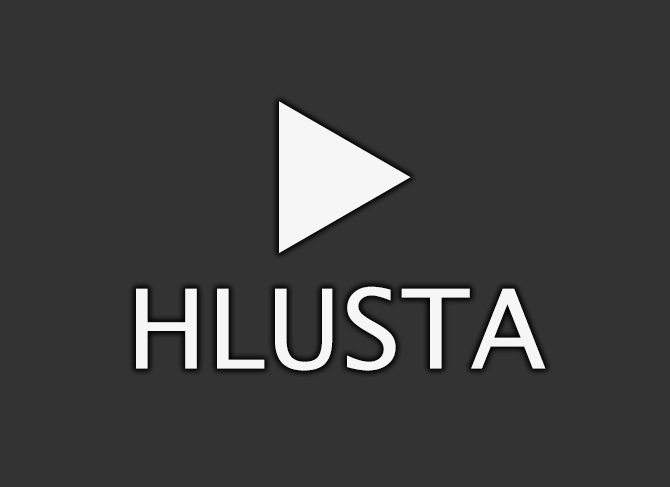
<style>
.page{position:relative;width:670px;height:487px;background:#333333}
.page>*{position:absolute;margin:0}
.t1{font:180px "LucidaGrande";color:#f6f6f6}
.t2{font:110px "LucidaGrande";color:#f6f6f6}
</style>
<div class="page">
<p class="t1" style="left:279px;top:101px;width:132px;height:152px">▶</p>
<p class="t2" style="left:136px;top:286px;width:410px;height:85px">HLUSTA</p>
</div>
